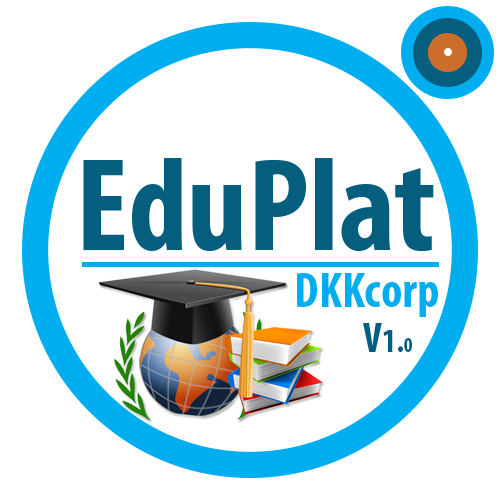
<style>
.page{position:relative;width:500px;height:500px;background:#ffffff}
.page>*{position:absolute;margin:0}
.t1{font:133.3px "MyriadPro-BoldCond";color:#065e7f}
.t2{font:50px "MyriadPro-BoldCond";color:#00aeef}
.t3{font:33.3px "MyriadPro-BoldCond";color:#065e7f}
.t4{font:41.7px "MyriadPro-BoldCond";color:#065e7f}
.t5{font:20.8px "MyriadPro-BoldCond";color:#065e7f}
</style>
<div class="page">
<p class="t1" style="left:83px;top:158px;width:351px;height:94px">EduPlat</p>
<p class="t2" style="left:297px;top:273px;width:141px;height:44px">DKKcorp</p>
<p class="t3" style="left:363px;top:323px;width:49px;height:29px"><span class="t4">V</span>1.<span class="t5">0</span></p>
</div>
